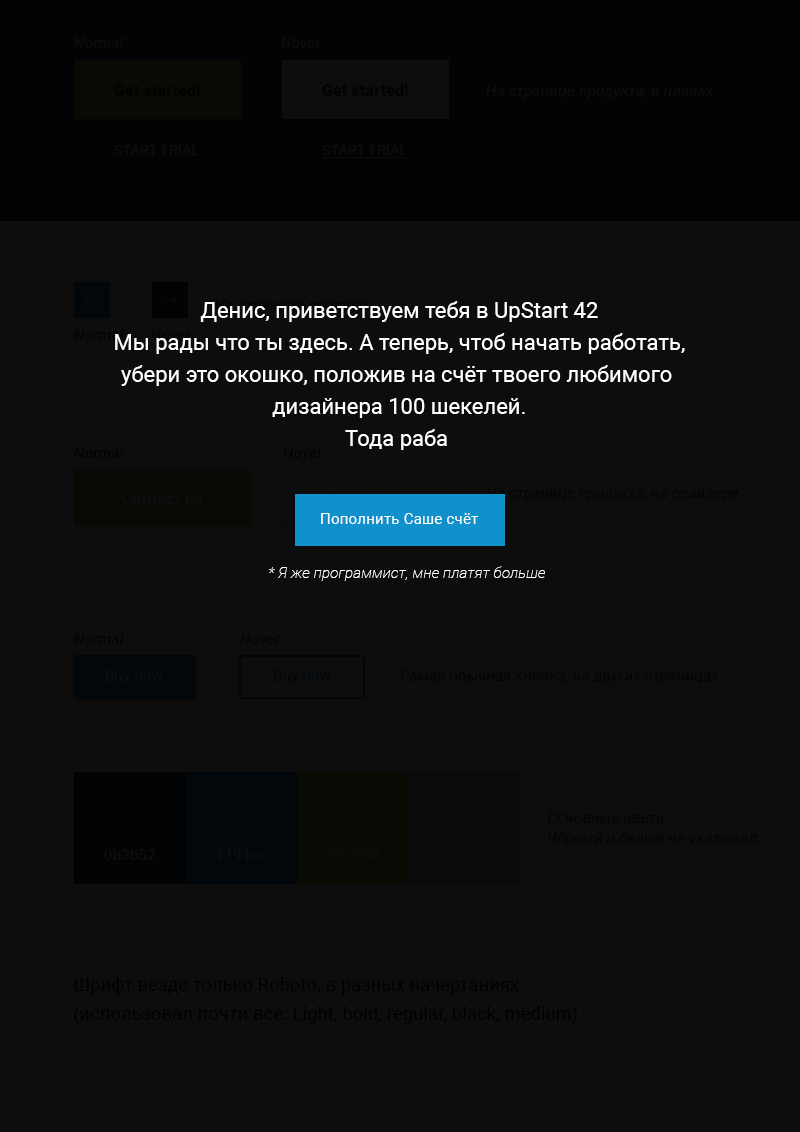
<style>
.page{position:relative;width:800px;height:1132px;background:#0d0d0d}
.page>*{position:absolute;margin:0}
.t1{font:15px "Roboto-Italic";letter-spacing:0.015em;color:#0d0d0d}
.t2{font:16px "Roboto-Bold";letter-spacing:0.01em;color:#010202}
.t3{font:14px "Roboto-Regular";letter-spacing:0.02em;color:#0d0d0d;text-transform:uppercase}
.t4{font:14px "Roboto-Regular";letter-spacing:0.02em;color:#0d0d0d;text-transform:uppercase;text-decoration:underline}
.t5{font:22px/32px "Roboto-Regular";color:#ffffff}
.t6{font:15px "Roboto-Italic";letter-spacing:0.015em;color:#111111}
.t7{font:17px "Roboto-Bold";color:#0d0d0d}
.t8{font:15px "Roboto-Italic";letter-spacing:0.015em;color:#010304}
.t9{font:15px "Roboto-Regular";letter-spacing:0.015em;color:#ffffff}
.t10{font:15px "Roboto-ThinItalic";letter-spacing:0.015em;color:#ffffff}
.t11{font:15px "Roboto-Regular";letter-spacing:0.015em;color:#0d0d0d}
.t12{font:15px "Roboto-Medium";letter-spacing:0.015em;color:#01070a}
.t13{font:15px/20px "Roboto-Italic";letter-spacing:0.015em;color:#010304}
.t14{font:15px "Roboto-Medium";letter-spacing:0.015em;color:#0d0d0d}
.t15{font:18px/29px "Roboto-Regular";letter-spacing:0.015em;color:#000000}
</style>
<div class="page">
<p class="t1" style="left:74px;top:37px;width:50px;height:11px">Normal</p>
<p class="t1" style="left:281px;top:37px;width:40px;height:11px">Hover</p>
<p class="t2" style="left:114px;top:84px;width:86px;height:12px">Get started!</p>
<p class="t2" style="left:322px;top:84px;width:86px;height:12px">Get started!</p>
<p class="t1" style="left:486px;top:85px;width:228px;height:14px">На странице продукта, в планах</p>
<p class="t3" style="left:114px;top:145px;width:85px;height:10px">Start trial</p>
<p class="t4" style="left:322px;top:145px;width:86px;height:13px">Start trial</p>
<p class="t5" style="left:115px;top:301px;width:570px;height:149px;text-align:center">Денис, приветствуем тебя в UpStart 42<br>Мы рады что ты здесь. А теперь, чтоб начать работать,<br>убери это окошко, положив на счёт твоего любимого <br>дизайнера 100 шекелей.<br>Тода раба</p>
<p class="t6" style="left:74px;top:447px;width:50px;height:11px">Normal</p>
<p class="t6" style="left:283px;top:447px;width:40px;height:11px">Hover</p>
<p class="t7" style="left:121px;top:492px;width:82px;height:12px">Contact us</p>
<p class="t8" style="left:486px;top:487px;width:253px;height:14px">На странице продукта, на слайдере</p>
<p class="t9" style="left:321px;top:513px;width:157px;height:11px">Пополнить Саше счёт</p>
<p class="t10" style="left:269px;top:566px;width:276px;height:15px">* Я же программист, мне платят больше</p>
<p class="t6" style="left:74px;top:633px;width:50px;height:11px">Normal</p>
<p class="t6" style="left:240px;top:633px;width:40px;height:11px">Hover</p>
<p class="t11" style="left:106px;top:670px;width:57px;height:14px">Buy now</p>
<p class="t12" style="left:274px;top:670px;width:57px;height:14px">Buy now</p>
<p class="t8" style="left:400px;top:670px;width:319px;height:14px">Самая обычная кнопка, на других страницах</p>
<p class="t13" style="left:547px;top:812px;width:213px;height:34px">Основные цвета. <br>Чёрный и белый не указывал.</p>
<p class="t14" style="left:104px;top:849px;width:52px;height:11px">0b3b52</p>
<p class="t14" style="left:216px;top:849px;width:51px;height:11px">1191cc</p>
<p class="t14" style="left:328px;top:849px;width:52px;height:11px">92d050</p>
<p class="t15" style="left:74px;top:977px;width:503px;height:47px">Шрифт везде только Roboto, в разных начертаниях <br>(использовал почти все: Light, bold, regular, black, medium)</p>
</div>
